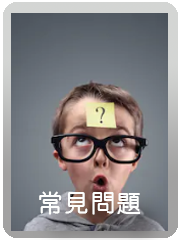
<style>
.page{position:relative;width:180px;height:240px}
.page>*{position:absolute;margin:0}
.t1{font:24px "DFYuan-Bd-HK-BF";letter-spacing:0.1em;color:#fdfefd}
</style>
<div class="page">
<p class="t1" style="left:39px;top:191px;width:102px;height:24px">常見問題</p>
</div>
